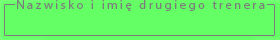
<style>
.page{position:relative;width:280px;height:40px;background:#64ff64}
.page>*{position:absolute;margin:0}
.t1{font:12.5px "MyriadPro-Regular";letter-spacing:0.2em;color:#7c7c7c}
</style>
<div class="page">
<p class="t1" style="left:17px;top:0px;width:248px;height:11px">Nazwisko i imię drugiego trenera</p>
</div>
